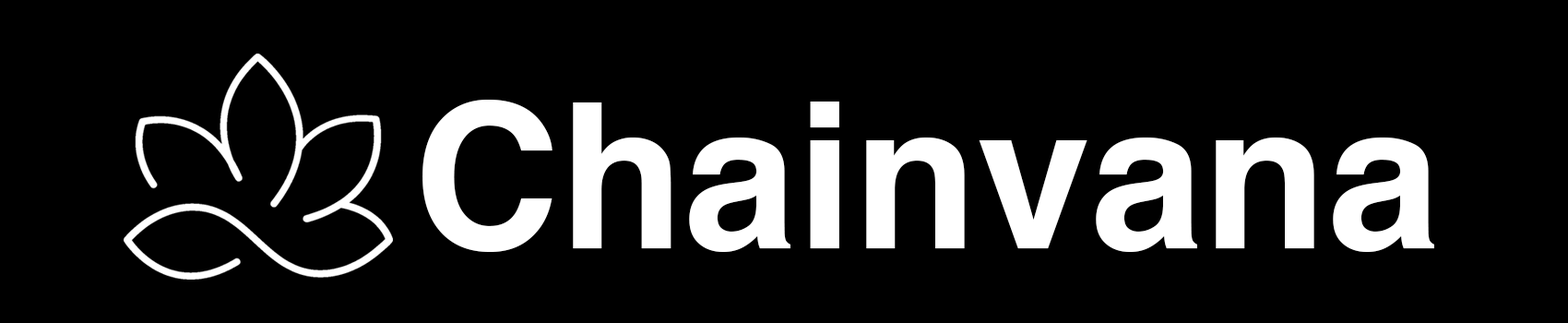
<style>
.page{position:relative;width:1568px;height:323px;background:#000000}
.page>*{position:absolute;margin:0}
.t1{font:202.9px "Helvetica-Bold";color:#ffffff}
</style>
<div class="page">
<p class="t1" style="left:422px;top:100px;width:1012px;height:152px">Chainvana</p>
</div>
